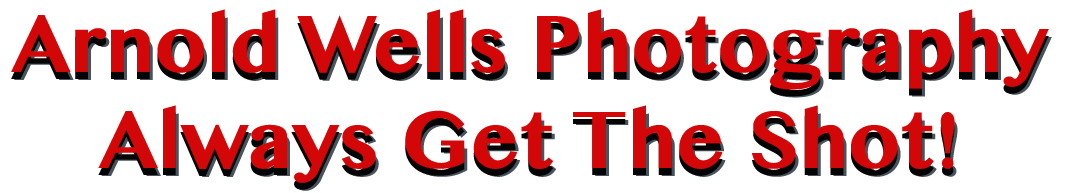
<style>
.page{position:relative;width:1066px;height:193px;background:#ffffff}
.page>*{position:absolute;margin:0}
.t1{font:80px "TamilMN-Bold"}
.t2{font:80px "TamilMN-Bold";color:#d30707}
</style>
<div class="page">
<p class="t1" style="left:11px;top:16px;width:1038px;height:174px;text-align:center">Arnold Wells Photography<br>Always Get The Shot!</p>
<p class="t2" style="left:11px;top:9px;width:1038px;height:174px;text-align:center">Arnold Wells Photography<br>Always Get The Shot!</p>
</div>
